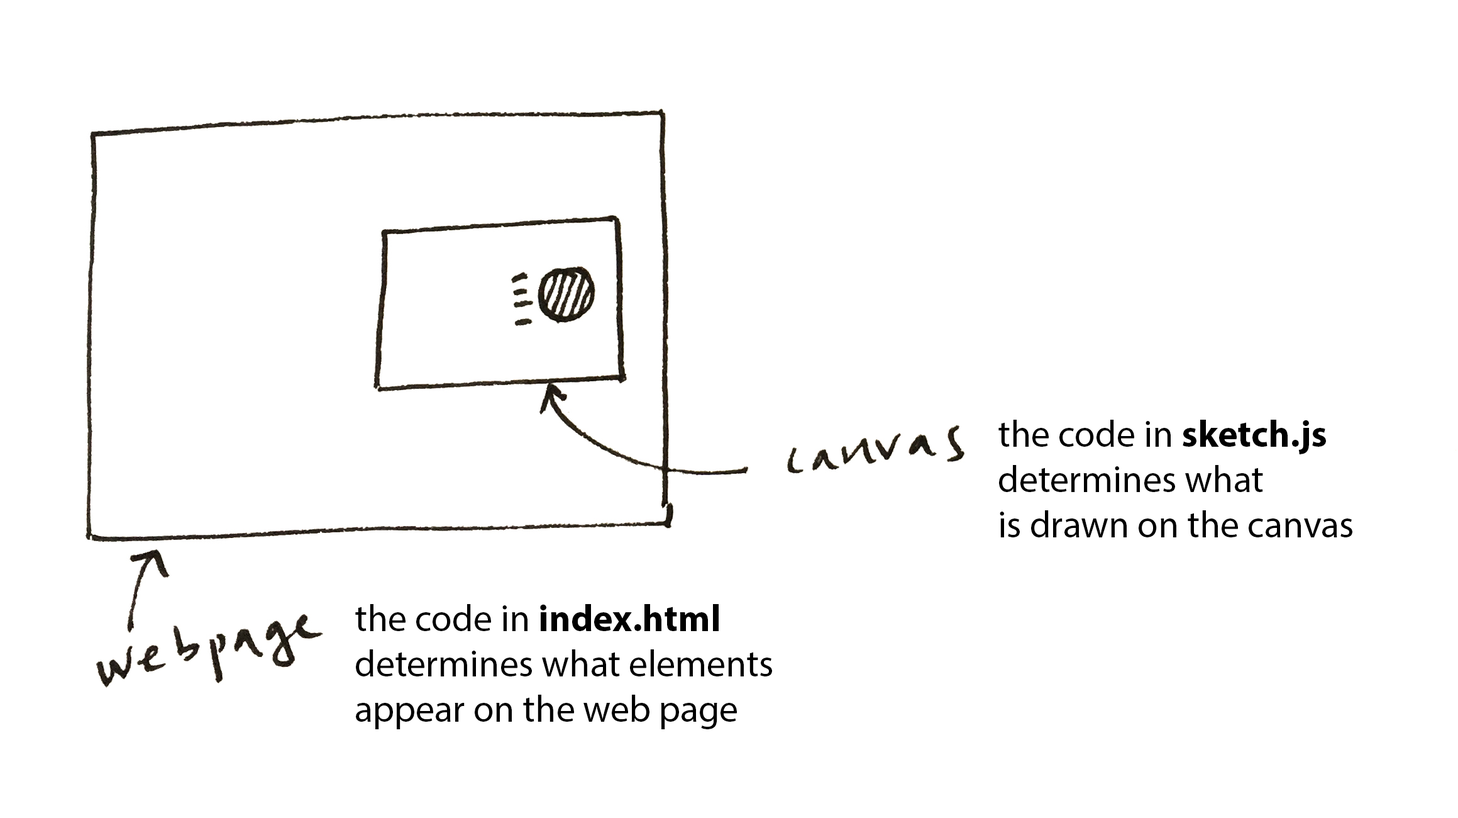
<style>
.page{position:relative;width:1458px;height:818px;background:#ffffff}
.page>*{position:absolute;margin:0}
.t1{font:37.7px "MyriadPro-Regular";color:#000000}
.t2{font:37.7px "MyriadPro-Bold";color:#000000}
</style>
<div class="page">
<p class="t1" style="left:999px;top:419px;width:354px;height:118px">the code in <span class="t2">sketch.js <br></span>determines what <br>is drawn on the canvas</p>
<p class="t1" style="left:355px;top:604px;width:417px;height:125px">the code in <span class="t2">index.html</span> <br>determines what elements<br>appear on the web page</p>
</div>
